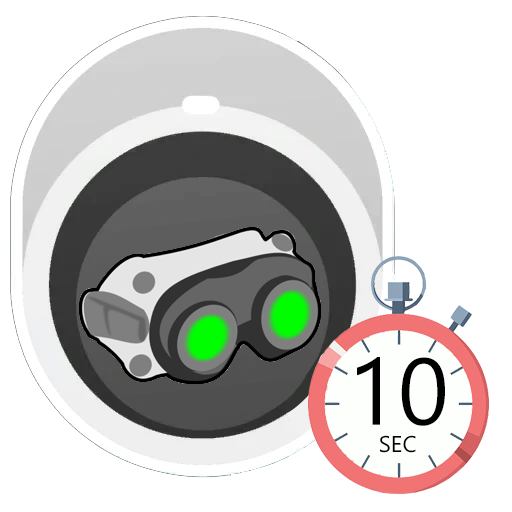
<style>
.page{position:relative;width:512px;height:512px;background:#ffffff}
.page>*{position:absolute;margin:0}
.t1{font:22.7px "Gadugi";color:#000000;text-transform:uppercase}
.t2{font:94.6px "Gadugi";color:#000000;text-transform:uppercase}
</style>
<div class="page">
<p class="t1" style="left:357px;top:357px;width:88px;height:96px;text-align:center"><span class="t2">10<br></span>sec</p>
</div>
